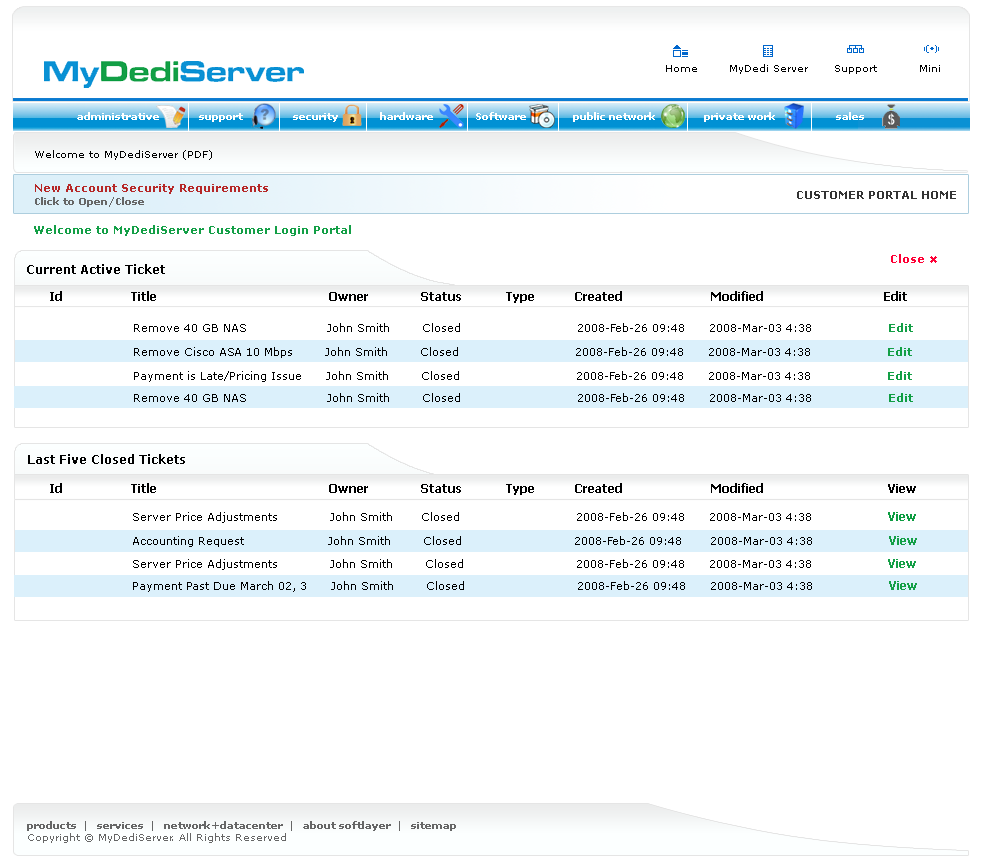
<style>
.page{position:relative;width:984px;height:866px;background:#ffffff}
.page>*{position:absolute;margin:0}
.t1{font:10px "Verdana";color:#000000}
.t2{font:10px "Verdana-Bold";color:#ffffff}
.t3{font:11px "Verdana-Bold";color:#b62727}
.t4{font:10px "Verdana-Bold";color:#666666}
.t5{font:11px "Verdana-Bold";color:#333333}
.t6{font:11px "Verdana-Bold";color:#139f46}
.t7{font:11px "Verdana-Bold";color:#ff0036}
.t8{font:10px "Wingdings3";color:#ff6633}
.t9{font:11px "Wingdings2";color:#ff0036}
.t10{font:12px "Verdana-Bold";color:#000000}
.t11{font:12px "Tahoma-Bold";color:#000000}
.t12{font:11px "Verdana";color:#000000}
.t13{font:11px "Verdana-Bold";color:#109e43}
.t14{font:12px "Tahoma-Bold";color:#0d9c41}
.t15{font:12px "Tahoma-Bold";color:#139f46}
.t16{font:10px "Verdana";color:#666666}
</style>
<div class="page">
<p class="t1" style="left:666px;top:65px;width:31px;height:7px">Home</p>
<p class="t1" style="left:730px;top:64px;width:78px;height:10px">MyDedi Server</p>
<p class="t1" style="left:835px;top:65px;width:42px;height:9px">Support</p>
<p class="t1" style="left:920px;top:65px;width:20px;height:7px">Mini</p>
<p class="t2" style="left:77px;top:112px;width:82px;height:8px">administrative</p>
<p class="t2" style="left:199px;top:113px;width:44px;height:9px">support</p>
<p class="t2" style="left:293px;top:113px;width:45px;height:9px">security</p>
<p class="t2" style="left:380px;top:112px;width:53px;height:8px">hardware</p>
<p class="t2" style="left:476px;top:112px;width:50px;height:8px">Software</p>
<p class="t2" style="left:573px;top:112px;width:82px;height:10px">public network</p>
<p class="t2" style="left:704px;top:112px;width:71px;height:10px">private work</p>
<p class="t2" style="left:836px;top:112px;width:28px;height:8px">sales</p>
<p class="t1" style="left:35px;top:150px;width:177px;height:10px">Welcome to MyDediServer (PDF)</p>
<p class="t3" style="left:35px;top:184px;width:233px;height:10px">New Account Security Requirements</p>
<p class="t4" style="left:35px;top:197px;width:109px;height:10px">Click to Open/Close</p>
<p class="t5" style="left:797px;top:191px;width:159px;height:8px">CUSTOMER PORTAL HOME</p>
<p class="t6" style="left:34px;top:225px;width:317px;height:11px">Welcome to MyDediServer Customer Login Portal</p>
<p class="t7" style="left:891px;top:254px;width:46px;height:9px"><span class="t8"> </span>Close <span class="t9">Ò</span></p>
<p class="t10" style="left:27px;top:264px;width:138px;height:10px">Current Active Ticket</p>
<p class="t11" style="left:50px;top:291px;width:857px;height:12px">Id                 Title                                           Owner             Status           Type          Created                      Modified                              Edit</p>
<p class="t12" style="left:134px;top:323px;width:779px;height:9px">Remove 40 GB NAS                    John Smith        Closed                             2008-Feb-26 09:48      2008-Mar-03 4:38                   <span class="t6">Edit</span></p>
<p class="t12" style="left:134px;top:347px;width:778px;height:11px">Remove Cisco ASA 10 Mbps        John Smith        Closed                             2008-Feb-26 09:48      2008-Mar-03 4:38                   <span class="t6">Edit</span></p>
<p class="t12" style="left:134px;top:371px;width:778px;height:11px">Payment is Late/Pricing Issue      John Smith        Closed                             2008-Feb-26 09:48      2008-Mar-03 4:38                   <span class="t6">Edit</span></p>
<p class="t12" style="left:134px;top:393px;width:779px;height:9px">Remove 40 GB NAS                    John Smith        Closed                             2008-Feb-26 09:48      2008-Mar-03 4:38                   <span class="t13">Edit</span></p>
<p class="t10" style="left:28px;top:454px;width:157px;height:10px">Last Five Closed Tickets</p>
<p class="t11" style="left:50px;top:483px;width:866px;height:12px">Id                 Title                                           Owner             Status           Type          Created                      Modified                               View</p>
<p class="t12" style="left:133px;top:512px;width:783px;height:11px">Server Price Adjustments             John Smith       Closed                             2008-Feb-26 09:48      2008-Mar-03 4:38                   <span class="t14">View</span></p>
<p class="t12" style="left:133px;top:536px;width:784px;height:11px">Accounting Request                     John Smith        Closed                            2008-Feb-26 09:48       2008-Mar-03 4:38                   <span class="t15">View</span></p>
<p class="t12" style="left:133px;top:559px;width:783px;height:11px">Server Price Adjustments             John Smith        Closed                            2008-Feb-26 09:48      2008-Mar-03 4:38                   <span class="t15">View</span></p>
<p class="t12" style="left:133px;top:581px;width:784px;height:11px">Payment Past Due March 02, 3      John Smith        Closed                            2008-Feb-26 09:48      2008-Mar-03 4:38                   <span class="t15">View</span></p>
<p class="t4" style="left:27px;top:821px;width:429px;height:22px">products  |   services  |   network+datacenter  |   about softlayer  |   sitemap<br><span class="t16">Copyright © MyDediServer. All Rights Reserved</span></p>
</div>
